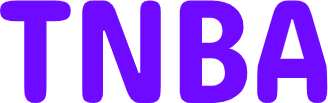
<style>
.page{position:relative;width:328px;height:103px;background:#6d0aff}
.page>*{position:absolute;margin:0}
.t1{font:150px "ConcertOne-Regular";color:#6d0aff}
</style>
<div class="page">
<p class="t1" style="left:0px;top:0px;width:328px;height:103px">TNBA</p>
</div>
